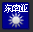
<style>
.page{position:relative;width:33px;height:32px;background:#000090}
.page>*{position:absolute;margin:0}
.t1{font:10.4px "SimSun";letter-spacing:-0.25em;color:#ffffff}
</style>
<div class="page">
<p class="t1" style="left:4px;top:4px;width:24px;height:9px">东南亚</p>
</div>
